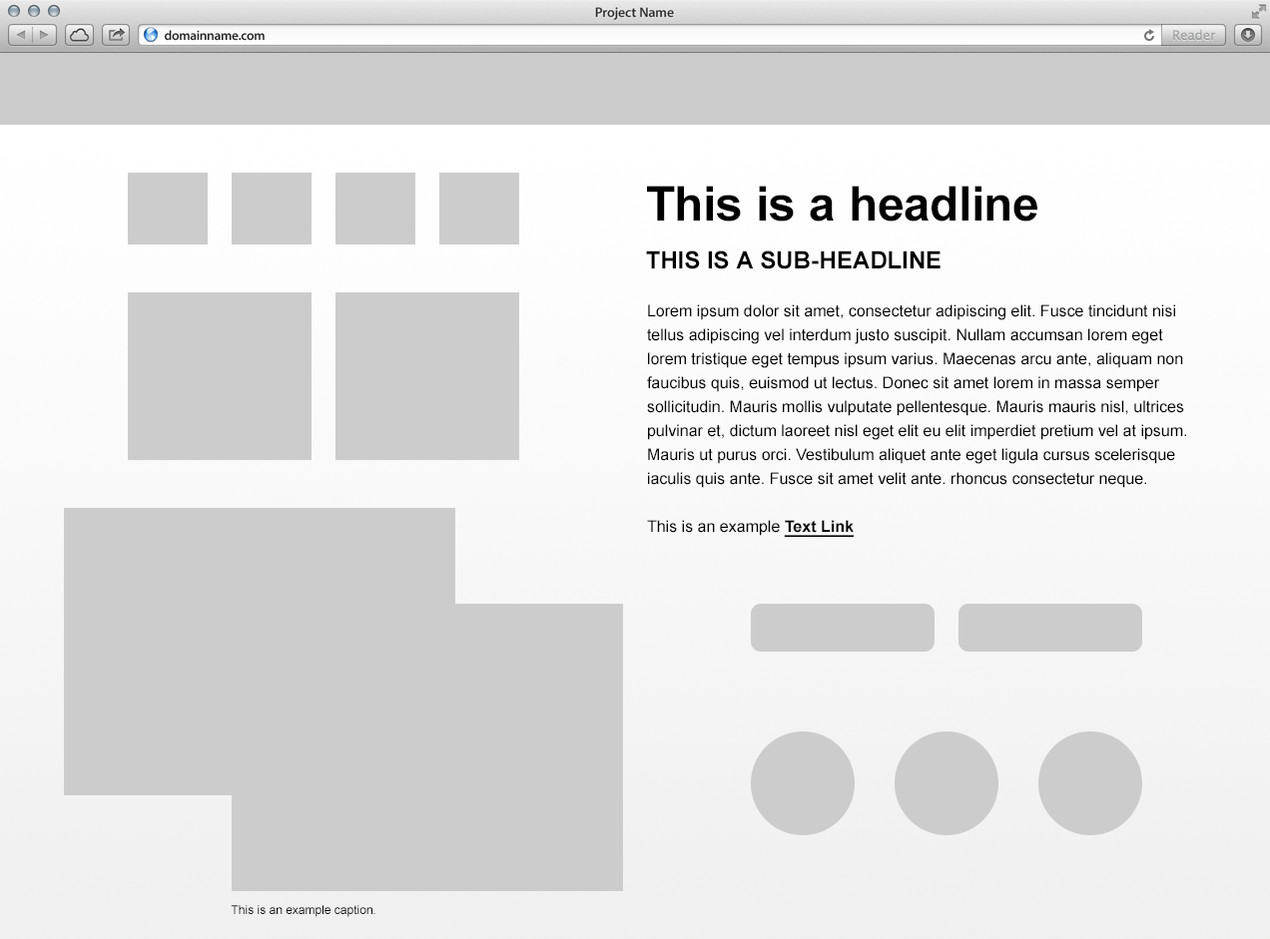
<style>
.page{position:relative;width:1270px;height:939px;background:#cccccc}
.page>*{position:absolute;margin:0}
.t1{font:47.9px "Arial-BoldMT";color:#000000}
.t2{font:24px "Arial-BoldMT";color:#000000;text-transform:uppercase}
.t3{font:16px/24px "ArialMT";color:#000000}
.t4{font:16px/24px "Arial-BoldMT";color:#000000;text-decoration:underline}
.t5{font:12px "ArialMT";color:#000000}
</style>
<div class="page">
<p class="t1" style="left:647px;top:186px;width:390px;height:36px">This is a headline</p>
<p class="t2" style="left:646px;top:251px;width:294px;height:18px">This is a sub-headline</p>
<p class="t3" style="left:647px;top:304px;width:539px;height:233px">Lorem ipsum dolor sit amet, consectetur adipiscing elit. Fusce tincidunt nisi tellus adipiscing vel interdum justo suscipit. Nullam accumsan lorem eget lorem tristique eget tempus ipsum varius. Maecenas arcu ante, aliquam non faucibus quis, euismod ut lectus. Donec sit amet lorem in massa semper sollicitudin. Mauris mollis vulputate pellentesque. Mauris mauris nisl, ultrices pulvinar et, dictum laoreet nisl eget elit eu elit imperdiet pretium vel at ipsum. Mauris ut purus orci. Vestibulum aliquet ante eget ligula cursus scelerisque iaculis quis ante. Fusce sit amet velit ante. rhoncus consectetur neque.<br><br>This is an example <span class="t4">Text Link</span></p>
<p class="t5" style="left:231px;top:905px;width:144px;height:12px">This is an example caption.</p>
</div>
